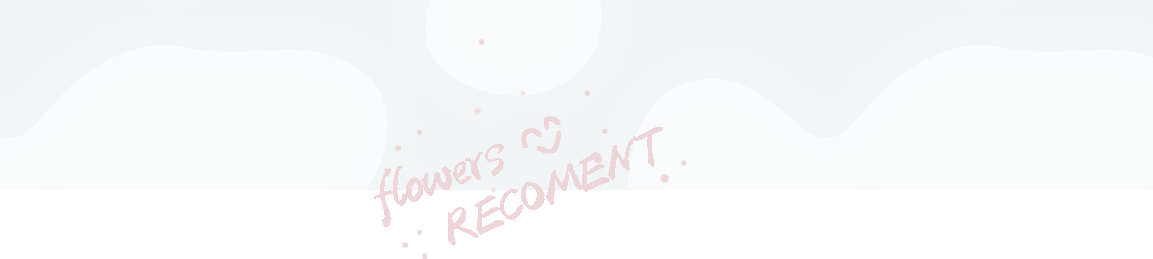
<style>
.page{position:relative;width:1153px;height:259px;background:#ffffff}
.page>*{position:absolute;margin:0}
.t1{font:56px "yuweij";letter-spacing:-0.12em;color:#eed5d8;text-transform:uppercase}
.t2{font:56px "yuweij";letter-spacing:-0.12em;color:#eed5d8}
</style>
<div class="page">
<p class="t1" style="left:448px;top:127px;width:215px;height:119px;rotate:-22deg">recoment</p>
<p class="t2" style="left:374px;top:144px;width:130px;height:83px;rotate:-20deg">flowers</p>
</div>
